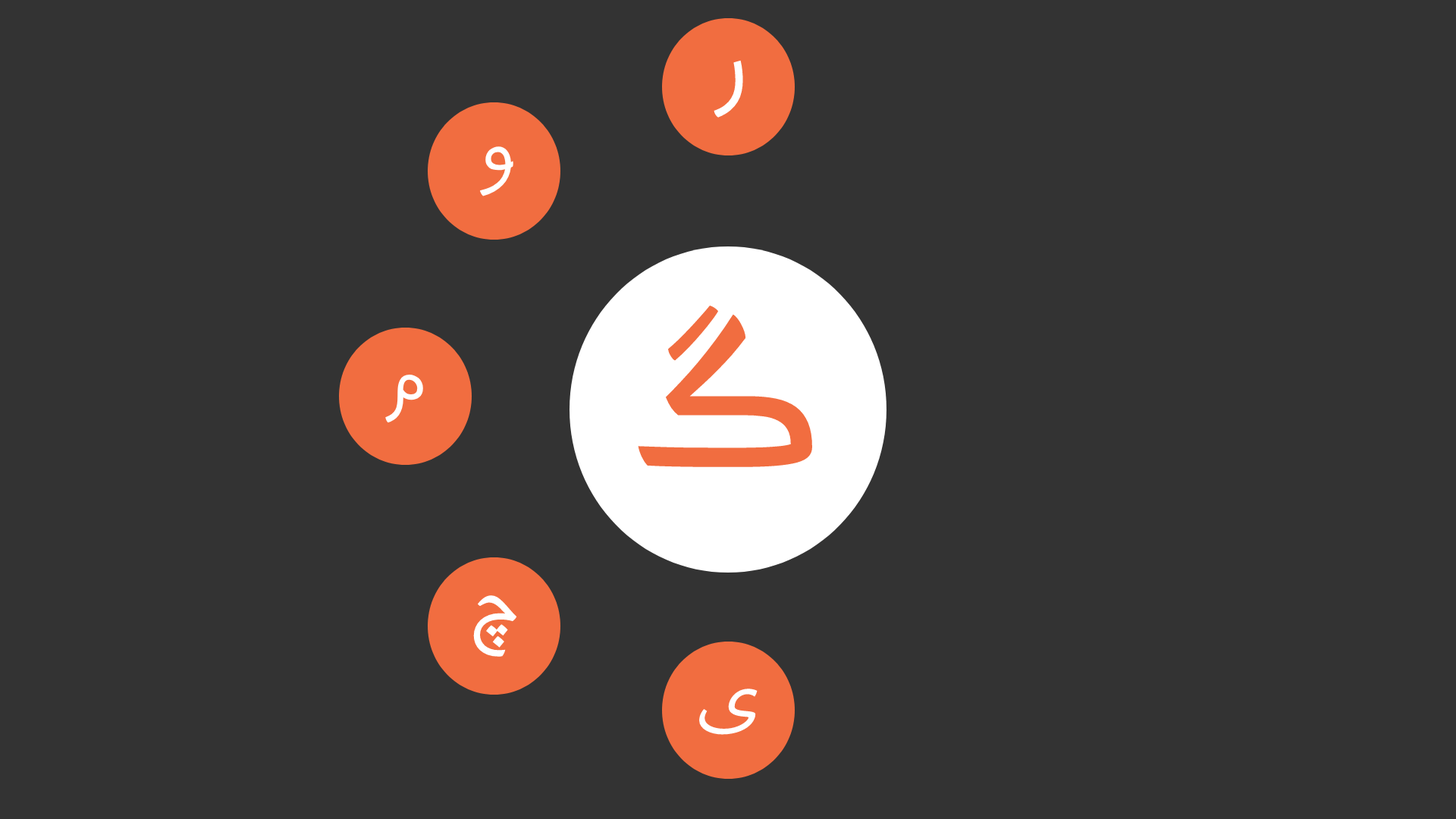
<style>
.page{position:relative;width:1456px;height:819px;background:#333333}
.page>*{position:absolute;margin:0}
.t1{font:109.2px "Harmattan-Regular";color:#ffffff}
.t2{font:84.9px "Harmattan-Regular";color:#ffffff}
.t3{font:296.5px "Harmattan-Regular";color:#f16d40}
.t4{font:97.1px "Harmattan-Regular";color:#ffffff}
</style>
<div class="page">
<p class="t1" style="left:714px;top:60px;width:29px;height:58px">ر</p>
<p class="t2" style="left:479px;top:146px;width:34px;height:50px">و</p>
<p class="t3" style="left:638px;top:305px;width:174px;height:162px">گ</p>
<p class="t2" style="left:385px;top:375px;width:38px;height:48px">م</p>
<p class="t4" style="left:473px;top:595px;width:44px;height:62px">چ</p>
<p class="t2" style="left:699px;top:689px;width:59px;height:46px">ی</p>
</div>
